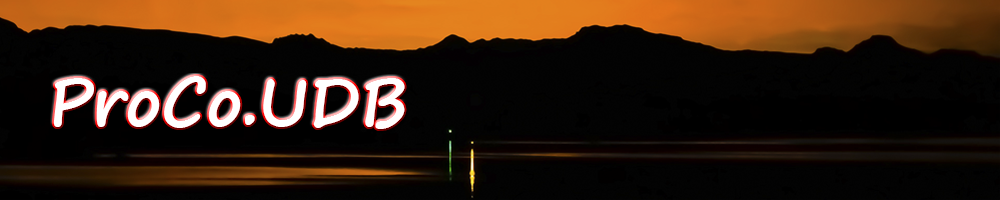
<style>
.page{position:relative;width:1000px;height:200px}
.page>*{position:absolute;margin:0}
.t1{font:65px "SegoePrint-Bold";color:#ffffff}
</style>
<div class="page">
<p class="t1" style="left:53px;top:76px;width:352px;height:53px">ProCo.UDB</p>
<p class="t1" style="left:53px;top:76px;width:352px;height:53px">ProCo.UDB</p>
</div>
